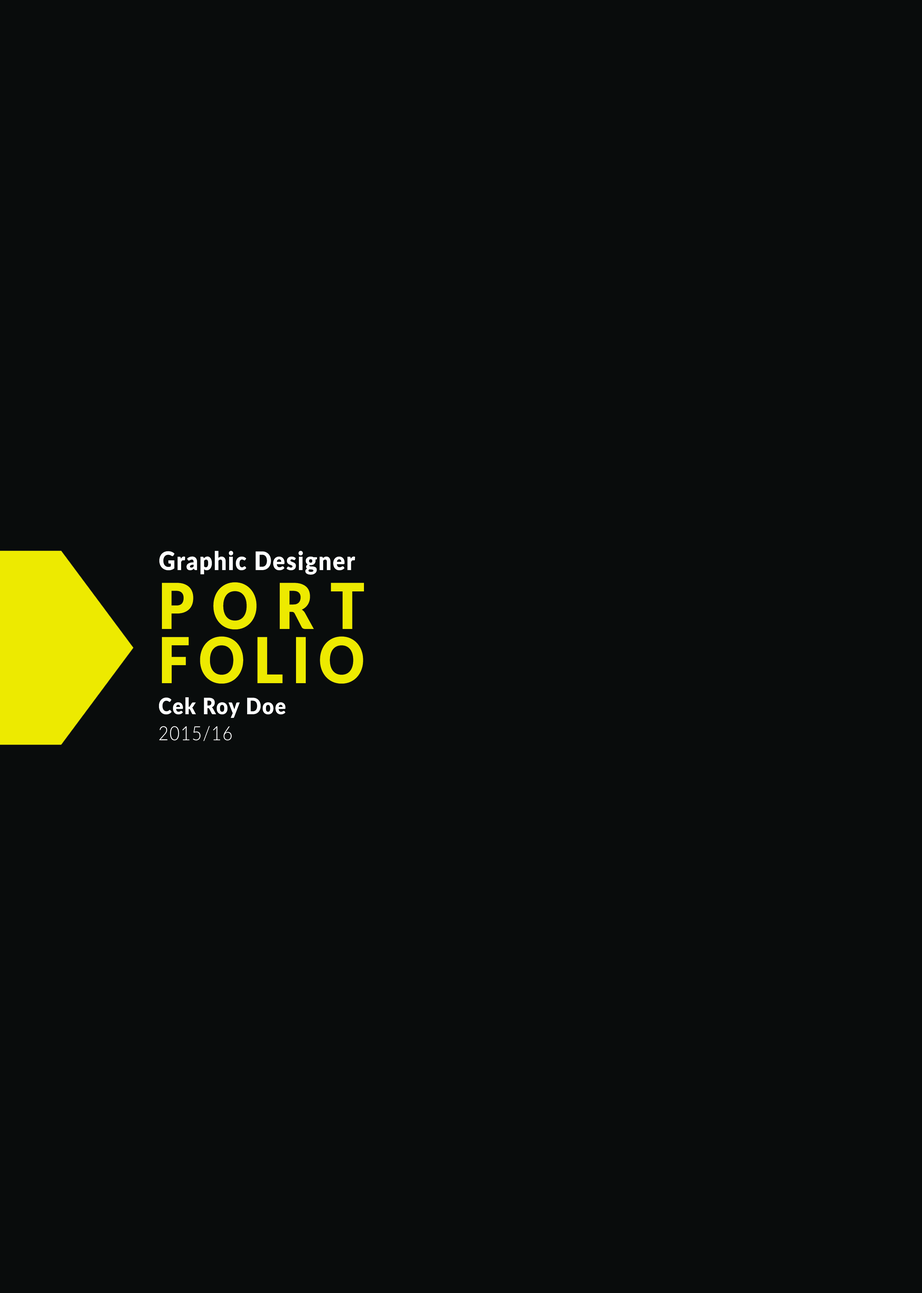
<style>
.page{position:relative;width:922px;height:1293px;background:#090c0c}
.page>*{position:absolute;margin:0}
.t1{font:25.6px "Lato-Black";letter-spacing:0.05em;color:#ffffff;scale:0.9 1}
.t2{font:63.2px/54.2px "Lato-Black";letter-spacing:0.05em;color:#edea00;scale:0.9 1}
.t3{font:22.6px "Lato-Black";letter-spacing:0.05em;color:#ffffff;scale:0.9 1}
.t4{font:19.6px "Lato-Light";letter-spacing:0.05em;color:#ffffff;scale:0.9 1}
</style>
<div class="page">
<p class="t1" style="left:159px;top:551px;width:196px;height:24px">Graphic Designer</p>
<p class="t2" style="left:162px;top:582px;width:202px;height:102px;text-align:justify">PORT<br>FOLIO</p>
<p class="t3" style="left:159px;top:697px;width:127px;height:21px">Cek Roy Doe</p>
<p class="t4" style="left:159px;top:726px;width:73px;height:16px">2015/16</p>
</div>
